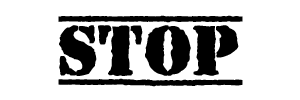
<style>
.page{position:relative;width:300px;height:100px;background:#ffffff}
.page>*{position:absolute;margin:0}
.t1{font:70.9px "TopSecret";letter-spacing:-0.02em;color:#000000;text-transform:uppercase;font-weight:bold}
</style>
<div class="page">
<p class="t1" style="left:58px;top:15px;width:185px;height:72px">stop</p>
</div>
